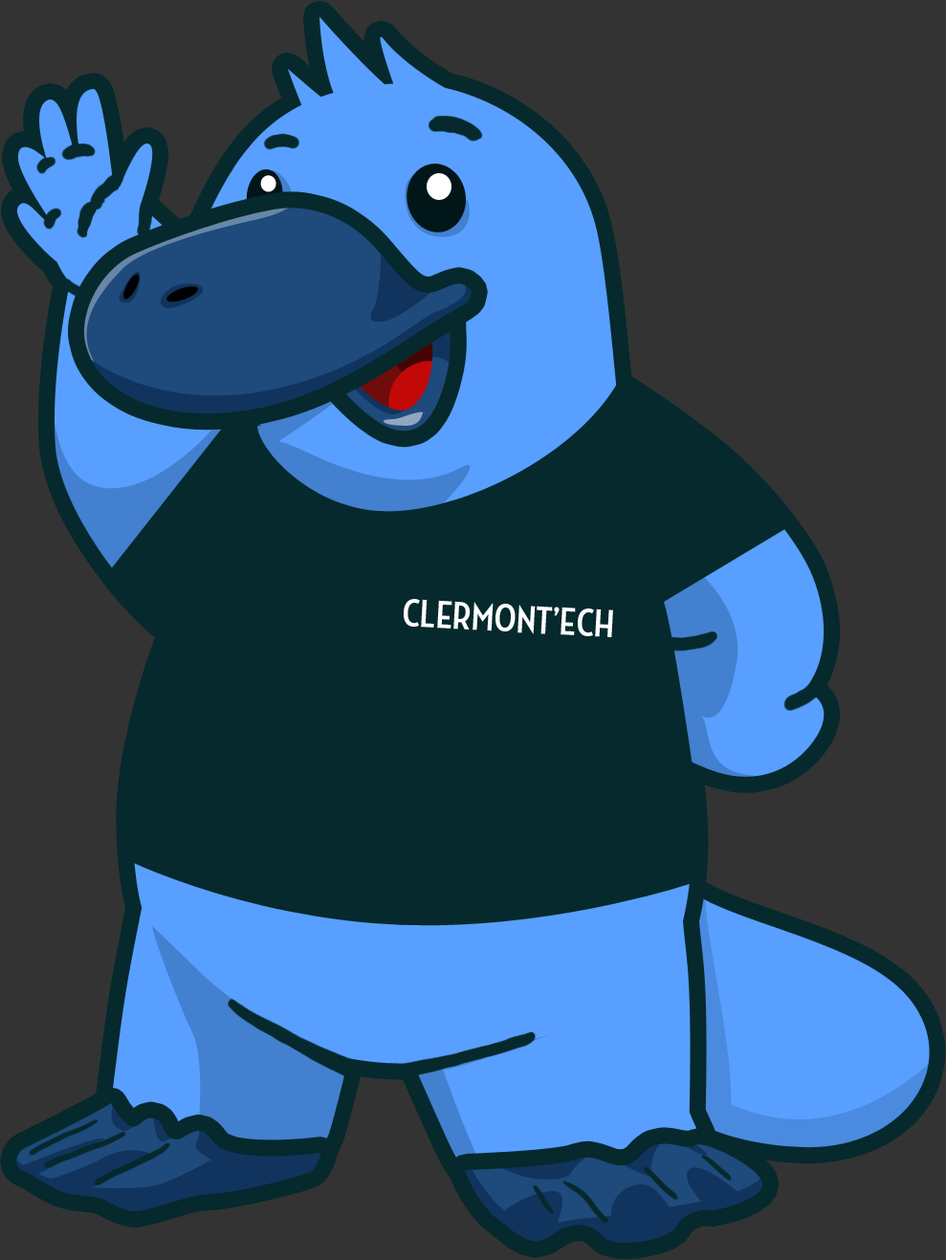
<style>
.page{position:relative;width:946px;height:1260px;background:#333333}
.page>*{position:absolute;margin:0}
.t1{font:39.9px "NeutrafaceCondensed-Bold";color:#ffffff;text-transform:uppercase}
</style>
<div class="page">
<p class="t1" style="left:404px;top:599px;width:209px;height:38px;rotate:3deg">Clermont’ech</p>
</div>
